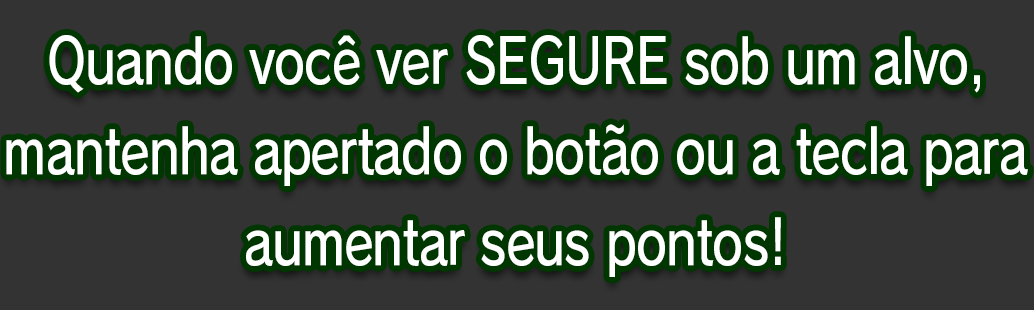
<style>
.page{position:relative;width:1034px;height:310px;background:#333333}
.page>*{position:absolute;margin:0}
.t1{font:61.3px/90.7px "RodinPro-DB";letter-spacing:-0.022em;color:#ffffff;scale:0.8 1}
</style>
<div class="page">
<p class="t1" style="left:6px;top:35px;width:1022px;height:242px;text-align:center">Quando você ver SEGURE sob um alvo,<br>mantenha apertado o botão ou a tecla para<br>aumentar seus pontos!</p>
</div>
